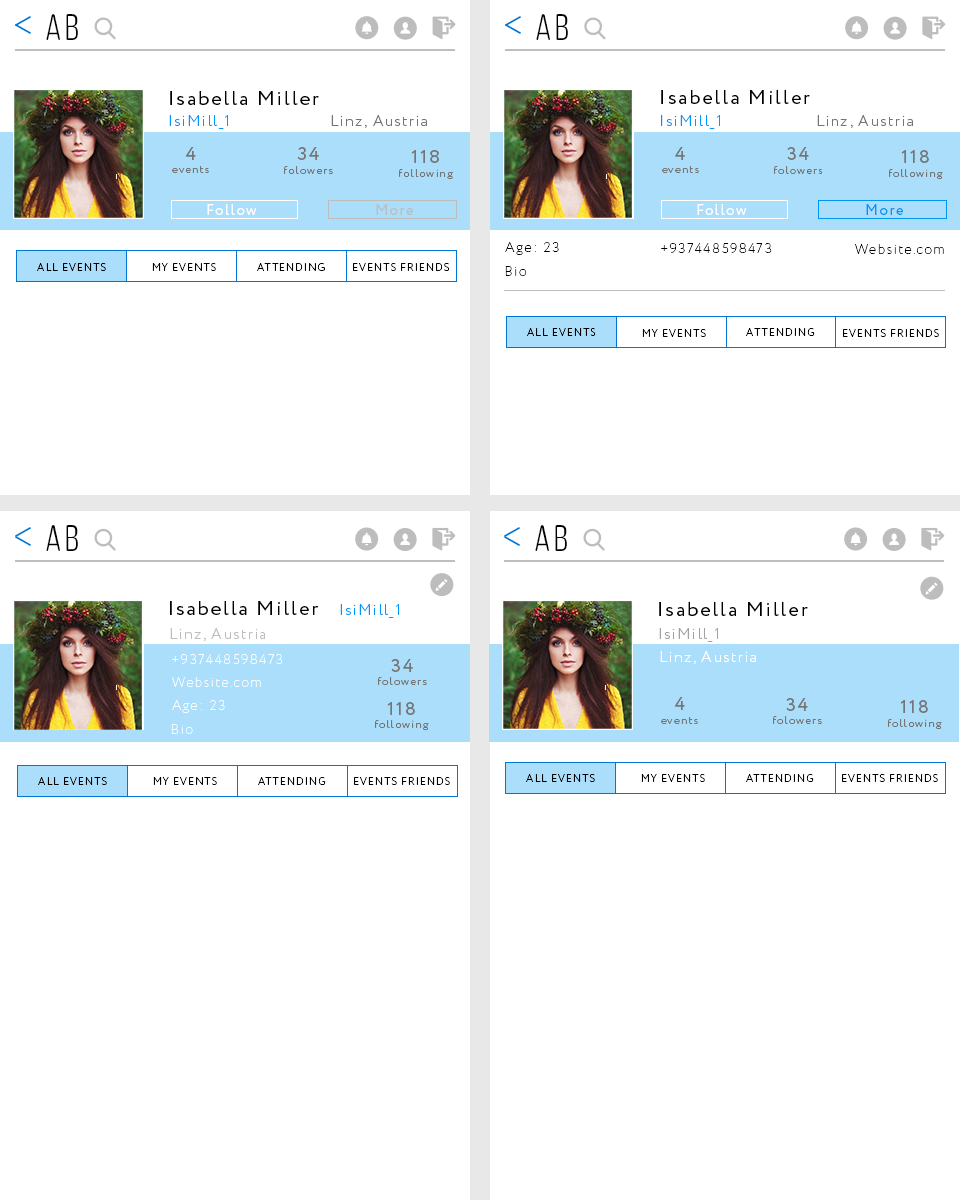
<style>
.page{position:relative;width:960px;height:1200px;background:#ffffff}
.page>*{position:absolute;margin:0}
.t1{font:37px "ClutchSans-Regular";letter-spacing:0.1em;color:#000000}
.t2{font:20px "Circe-Regular";letter-spacing:0.1em;color:#000000}
.t3{font:18.6px "Circe-Regular";letter-spacing:0.1em;color:#000000}
.t4{font:15px "Circe-Light";letter-spacing:0.1em;color:#0097f6}
.t5{font:15px "Circe-Light";letter-spacing:0.1em;color:#747474}
.t6{font:11.3px "Circe-Light";letter-spacing:0.1em;color:#757575}
.t7{font:18.6px "Circe-Regular";letter-spacing:0.1em;color:#757575}
.t8{font:14.7px "Circe-Regular";letter-spacing:0.1em;color:#ffffff}
.t9{font:14.7px "Circe-Regular";letter-spacing:0.1em;color:#bdbdbd}
.t10{font:14.7px "Circe-Regular";letter-spacing:0.1em;color:#0096f5}
.t11{font:13.7px "Circe-ExtraLight";letter-spacing:0.1em;color:#000000}
.t12{font:10.3px "Circe-Light";letter-spacing:0.1em;color:#000000}
.t13{font:15px "Circe-Light";letter-spacing:0.1em;color:#bdbdbd}
.t14{font:15px "Circe-Light";letter-spacing:0.1em;color:#a1a1a1}
.t15{font:13.7px "Circe-ExtraLight";letter-spacing:0.1em;color:#fefefe}
.t16{font:15px "Circe-Light";letter-spacing:0.1em;color:#ffffff}
</style>
<div class="page">
<p class="t1" style="left:46px;top:14px;width:32px;height:26px">Ab</p>
<p class="t1" style="left:536px;top:14px;width:32px;height:26px">Ab</p>
<p class="t2" style="left:170px;top:91px;width:149px;height:14px">Isabella Miller</p>
<p class="t2" style="left:661px;top:90px;width:149px;height:14px"><span class="t3"> </span>Isabella Miller</p>
<p class="t4" style="left:169px;top:115px;width:59px;height:14px">IsiMill_1</p>
<p class="t5" style="left:331px;top:115px;width:96px;height:13px">Linz, Austria</p>
<p class="t4" style="left:661px;top:115px;width:59px;height:14px">IsiMill_1</p>
<p class="t5" style="left:817px;top:115px;width:96px;height:13px">Linz, Austria</p>
<p class="t6" style="left:172px;top:147px;width:37px;height:26px;text-align:center"><span class="t7">4<br></span>events</p>
<p class="t6" style="left:284px;top:147px;width:49px;height:27px;text-align:center"><span class="t7">34<br></span>folowers</p>
<p class="t6" style="left:399px;top:150px;width:54px;height:29px;text-align:center"><span class="t7">118<br></span>following</p>
<p class="t6" style="left:662px;top:147px;width:37px;height:26px;text-align:center"><span class="t7">4<br></span>events</p>
<p class="t6" style="left:774px;top:147px;width:49px;height:27px;text-align:center"><span class="t7">34<br></span>folowers</p>
<p class="t6" style="left:889px;top:150px;width:54px;height:29px;text-align:center"><span class="t7">118<br></span>following</p>
<p class="t8" style="left:207px;top:204px;width:50px;height:11px">Follow</p>
<p class="t9" style="left:376px;top:204px;width:37px;height:11px">More</p>
<p class="t8" style="left:697px;top:204px;width:50px;height:11px">Follow</p>
<p class="t10" style="left:866px;top:204px;width:37px;height:11px">More</p>
<p class="t11" style="left:505px;top:242px;width:54px;height:13px">Age: 23</p>
<p class="t11" style="left:661px;top:243px;width:111px;height:10px">+937448598473</p>
<p class="t11" style="left:855px;top:244px;width:89px;height:10px">Website.com</p>
<p class="t12" style="left:37px;top:263px;width:69px;height:8px">ALL EVENTS</p>
<p class="t12" style="left:152px;top:263px;width:64px;height:8px">MY EVENTS</p>
<p class="t12" style="left:257px;top:263px;width:68px;height:8px">ATTENDING</p>
<p class="t12" style="left:353px;top:263px;width:97px;height:8px">EVENTS FRIENDS</p>
<p class="t11" style="left:505px;top:266px;width:22px;height:10px">Bio</p>
<p class="t12" style="left:527px;top:328px;width:69px;height:8px">ALL EVENTS</p>
<p class="t12" style="left:642px;top:329px;width:64px;height:8px">MY EVENTS</p>
<p class="t12" style="left:746px;top:328px;width:69px;height:8px">ATTENDING</p>
<p class="t12" style="left:843px;top:329px;width:96px;height:8px">EVENTS FRIENDS</p>
<p class="t1" style="left:46px;top:525px;width:32px;height:26px">Ab</p>
<p class="t1" style="left:535px;top:525px;width:32px;height:26px">Ab</p>
<p class="t2" style="left:170px;top:601px;width:149px;height:14px">Isabella Miller</p>
<p class="t4" style="left:340px;top:604px;width:59px;height:14px">IsiMill_1</p>
<p class="t2" style="left:659px;top:602px;width:149px;height:14px">Isabella Miller</p>
<p class="t13" style="left:170px;top:628px;width:95px;height:13px">Linz, Austria</p>
<p class="t14" style="left:659px;top:628px;width:59px;height:14px">IsiMill_1</p>
<p class="t15" style="left:172px;top:654px;width:111px;height:10px">+937448598473</p>
<p class="t16" style="left:660px;top:651px;width:96px;height:13px">Linz, Austria</p>
<p class="t6" style="left:378px;top:659px;width:49px;height:26px;text-align:center"><span class="t7">34<br></span>folowers</p>
<p class="t15" style="left:172px;top:677px;width:89px;height:10px">Website.com</p>
<p class="t15" style="left:172px;top:700px;width:53px;height:13px">Age: 23</p>
<p class="t6" style="left:375px;top:702px;width:54px;height:28px;text-align:center"><span class="t7">118<br></span>following</p>
<p class="t6" style="left:661px;top:697px;width:37px;height:27px;text-align:center"><span class="t7">4<br></span>events</p>
<p class="t6" style="left:773px;top:698px;width:49px;height:26px;text-align:center"><span class="t7">34<br></span>folowers</p>
<p class="t6" style="left:888px;top:700px;width:54px;height:29px;text-align:center"><span class="t7">118<br></span>following</p>
<p class="t15" style="left:171px;top:724px;width:22px;height:10px">Bio</p>
<p class="t12" style="left:526px;top:774px;width:69px;height:8px">ALL EVENTS</p>
<p class="t12" style="left:641px;top:774px;width:64px;height:8px">MY EVENTS</p>
<p class="t12" style="left:746px;top:774px;width:68px;height:8px">ATTENDING</p>
<p class="t12" style="left:842px;top:774px;width:96px;height:8px">EVENTS FRIENDS</p>
<p class="t12" style="left:38px;top:777px;width:69px;height:8px">ALL EVENTS</p>
<p class="t12" style="left:153px;top:777px;width:64px;height:8px">MY EVENTS</p>
<p class="t12" style="left:258px;top:777px;width:68px;height:8px">ATTENDING</p>
<p class="t12" style="left:354px;top:777px;width:96px;height:8px">EVENTS FRIENDS</p>
</div>
